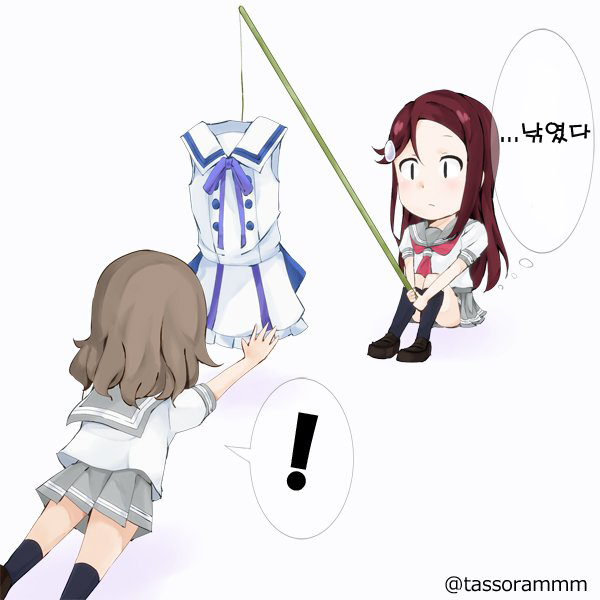
<style>
.page{position:relative;width:600px;height:600px;background:#fcfcfe}
.page>*{position:absolute;margin:0}
.t1{font:24px "H2porM";color:#060606}
</style>
<div class="page">
<p class="t1" style="left:501px;top:122px;width:90px;height:22px">...낚였다</p>
</div>
